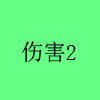
<style>
.page{position:relative;width:100px;height:100px;background:#66ff86}
.page>*{position:absolute;margin:0}
.t1{font:22.5px "SimSun";color:#000000}
</style>
<div class="page">
<p class="t1" style="left:21px;top:41px;width:55px;height:22px">伤害2</p>
</div>
